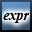
<style>
.page{position:relative;width:32px;height:32px}
.page>*{position:absolute;margin:0}
.t1{font:14px "TimesNewRomanPS-BoldItalicMT";color:#000000}
</style>
<div class="page">
<p class="t1" style="left:3px;top:13px;width:27px;height:10px">expr</p>
</div>
